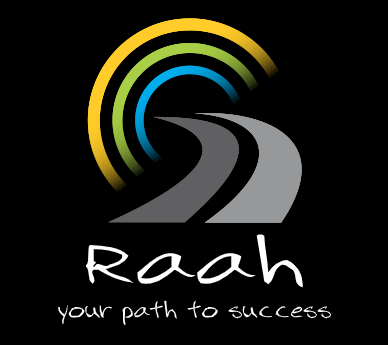
<style>
.page{position:relative;width:388px;height:345px;background:#000000}
.page>*{position:absolute;margin:0}
.t1{font:60px "2Dumb";color:#ffffff;scale:1.26 1}
.t2{font:20px "2Dumb";color:#ffffff}
</style>
<div class="page">
<p class="t1" style="left:86px;top:234px;width:217px;height:54px">Raah</p>
<p class="t2" style="left:58px;top:300px;width:273px;height:25px">your path to success</p>
</div>
